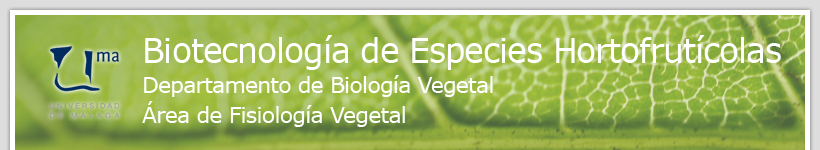
<style>
.page{position:relative;width:820px;height:150px}
.page>*{position:absolute;margin:0}
.t1{font:22.5px/29.9px "Verdana";letter-spacing:-0.025em;color:#ffffff;scale:0.96 1}
.t2{font:34px "Verdana";letter-spacing:-0.025em;color:#ffffff;scale:0.96 1}
</style>
<div class="page">
<p class="t1" style="left:142px;top:35px;width:639px;height:92px"><span class="t2">Biotecnología de Especies Hortofrutícolas<br></span>Departamento de Biología Vegetal<br>Área de Fisiología Vegetal</p>
</div>
